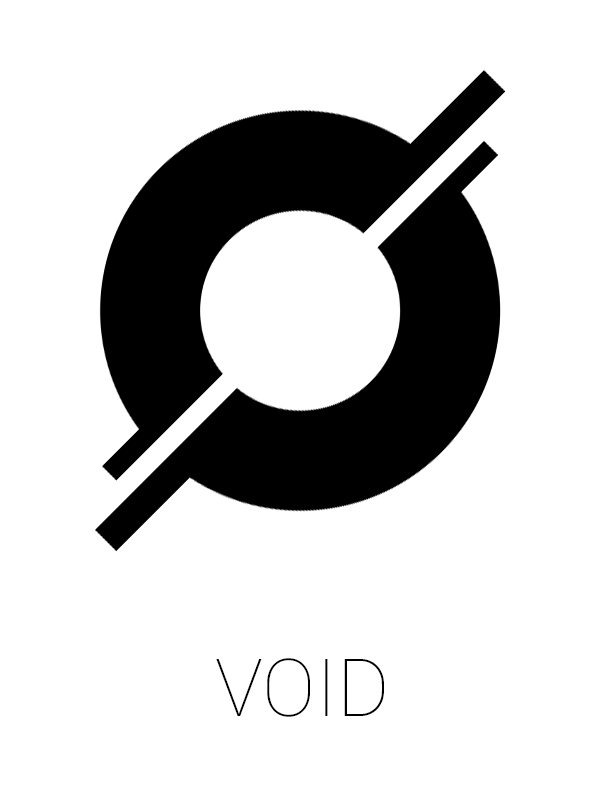
<style>
.page{position:relative;width:600px;height:800px;background:#ffffff}
.page>*{position:absolute;margin:0}
.t1{font:80px "Roboto-Thin";color:#000000}
</style>
<div class="page">
<p class="t1" style="left:216px;top:658px;width:168px;height:59px">VOID</p>
</div>
